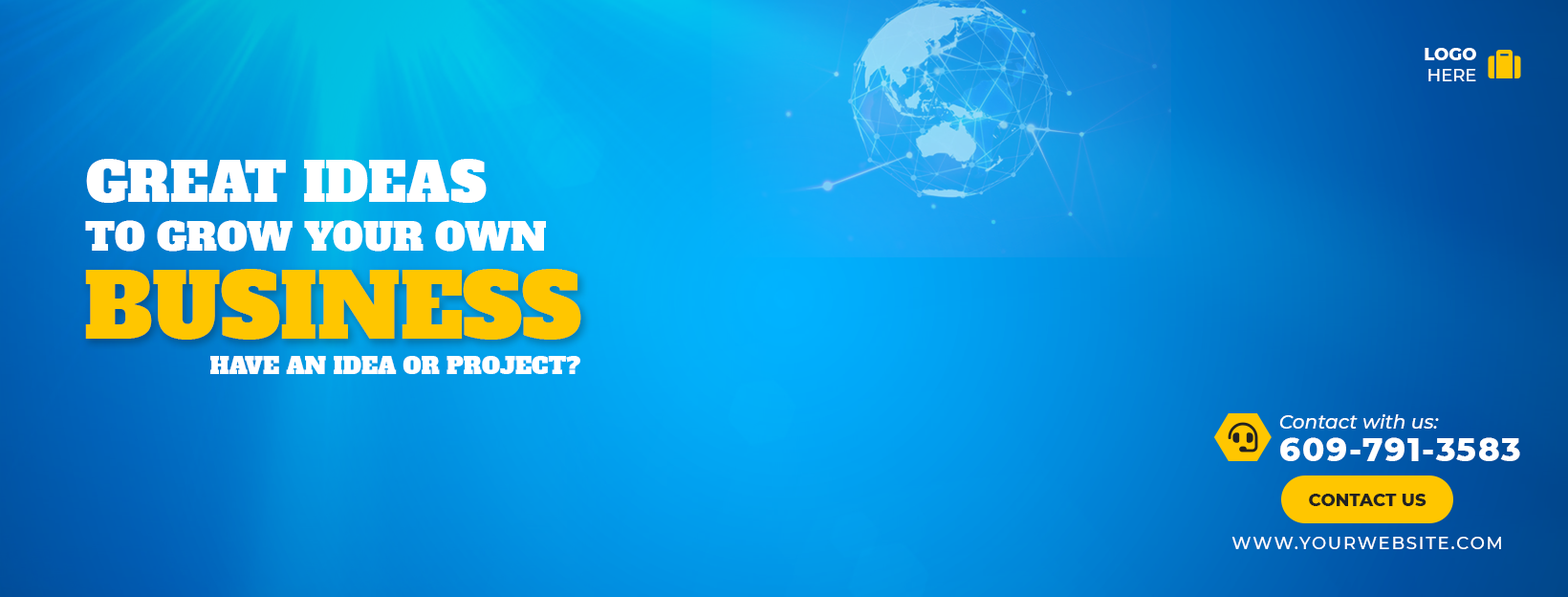
<style>
.page{position:relative;width:1568px;height:597px}
.page>*{position:absolute;margin:0}
.t1{font:17.2px "Montserrat-ExtraBold";color:#ffffff;text-transform:uppercase}
.t2{font:17.2px "Montserrat-Medium";color:#ffffff;text-transform:uppercase}
.t3{font:53.5px "AlfaSlabOne-Regular";color:#ffffff;text-transform:uppercase}
.t4{font:38.2px "AlfaSlabOne-Regular";color:#ffffff;text-transform:uppercase}
.t5{font:88px "AlfaSlabOne-Regular";color:#ffc600;text-transform:uppercase}
.t6{font:22.9px "AlfaSlabOne-Regular";color:#ffffff;text-transform:uppercase}
.t7{font:19.1px "Montserrat-MediumItalic";color:#ffffff}
.t8{font:32.5px "Montserrat-ExtraBold";letter-spacing:0.05em;color:#ffffff}
.t9{font:17.2px "Montserrat-ExtraBold";color:#222222;text-transform:uppercase}
.t10{font:17.2px "Montserrat-Medium";letter-spacing:0.1em;color:#ffffff;text-transform:uppercase}
</style>
<div class="page">
<p class="t1" style="left:1425px;top:48px;width:51px;height:33px;text-align:right">Logo<br><span class="t2">Here</span></p>
<p class="t3" style="left:86px;top:159px;width:401px;height:44px">Great ideas</p>
<p class="t4" style="left:85px;top:220px;width:461px;height:31px">To Grow your Own</p>
<p class="t5" style="left:85px;top:269px;width:496px;height:70px">Business</p>
<p class="t6" style="left:210px;top:356px;width:370px;height:18px">Have an Idea or project?</p>
<p class="t7" style="left:1279px;top:414px;width:160px;height:14px">Contact with us:</p>
<p class="t8" style="left:1280px;top:437px;width:240px;height:24px">609-791-3583</p>
<p class="t9" style="left:1309px;top:493px;width:117px;height:13px">Contact Us</p>
<p class="t10" style="left:1231px;top:536px;width:270px;height:13px">www.yourwebsite.com</p>
</div>
